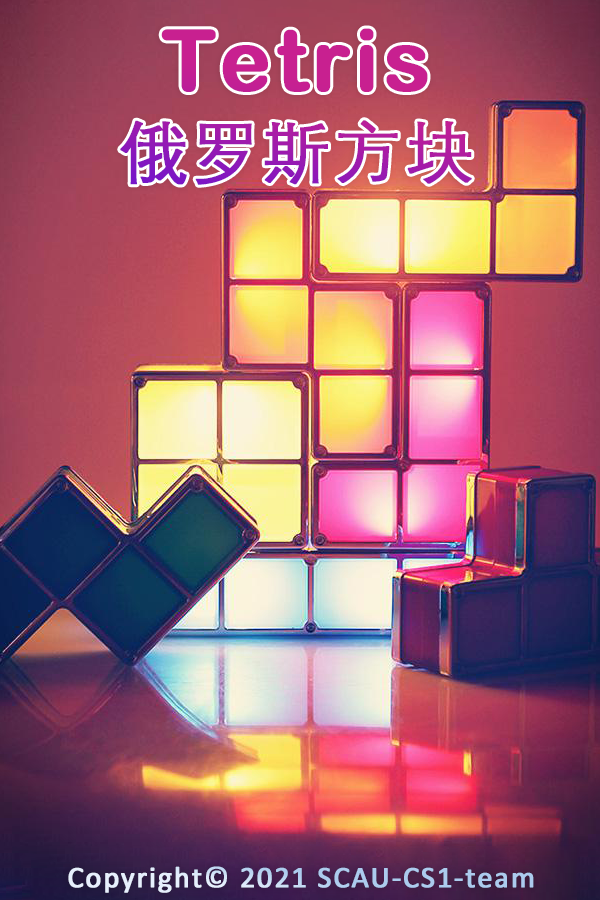
<style>
.page{position:relative;width:600px;height:900px}
.page>*{position:absolute;margin:0}
.t1{font:85px/102px "ArialRoundedMTBold";letter-spacing:0.04em;font-weight:bold}
.t2{font:67px/102px "DengXian";letter-spacing:0.04em;font-weight:bold}
.t3{font:30px "Calibri";letter-spacing:0.04em;font-weight:bold}
</style>
<div class="page">
<p class="t1" style="left:120px;top:28px;width:352px;height:157px;text-align:center">Tetris<br><span class="t2">俄罗斯方块</span></p>
<p class="t3" style="left:68px;top:866px;width:466px;height:27px">Copyright© 2021 SCAU-CS1-team</p>
</div>
